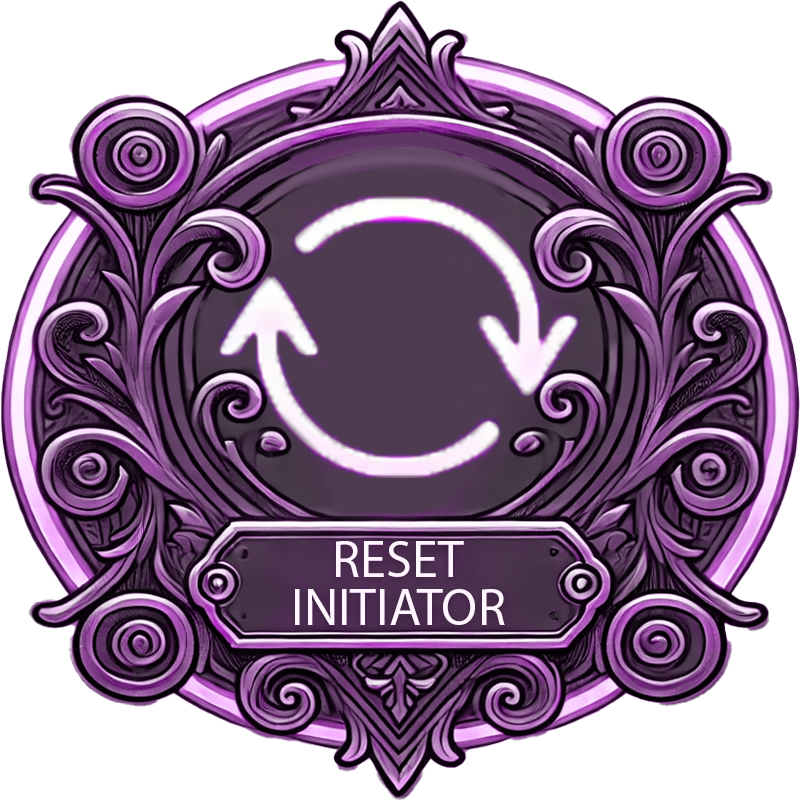
<style>
.page{position:relative;width:800px;height:800px;background:#ffffff}
.page>*{position:absolute;margin:0}
.t1{font:52.3px/48px "MyriadPro-Regular";color:#fef5ff}
</style>
<div class="page">
<p class="t1" style="left:295px;top:541px;width:210px;height:84px;text-align:center">RESET<br>INITIATOR</p>
</div>
